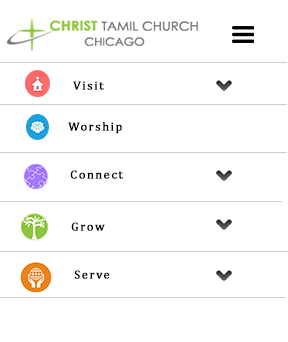
<style>
.page{position:relative;width:288px;height:342px;background:#ffffff}
.page>*{position:absolute;margin:0}
.t1{font:12px "Cambria";letter-spacing:0.1em;color:#000000;font-weight:bold;scale:1.03 1}
</style>
<div class="page">
<p class="t1" style="left:73px;top:81px;width:31px;height:9px">Visit</p>
<p class="t1" style="left:68px;top:122px;width:54px;height:12px">Worship</p>
<p class="t1" style="left:70px;top:170px;width:54px;height:9px">Connect</p>
<p class="t1" style="left:71px;top:222px;width:34px;height:9px">Grow</p>
<p class="t1" style="left:74px;top:270px;width:36px;height:9px">Serve</p>
</div>
